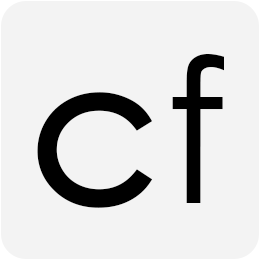
<style>
.page{position:relative;width:260px;height:260px;background:#f3f3f3}
.page>*{position:absolute;margin:0}
.t1{font:200px "CenturyGothic";color:#000000;font-weight:bold}
.t2{font:200px "CenturyGothic";color:#000000}
</style>
<div class="page">
<p class="t1" style="left:37px;top:54px;width:187px;height:154px">c<span class="t2">f</span></p>
</div>
